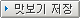
<style>
.page{position:relative;width:80px;height:18px}
.page>*{position:absolute;margin:0}
.t1{font:11px "Gulim";color:#333333}
</style>
<div class="page">
<p class="t1" style="left:15px;top:4px;width:57px;height:10px">맛보기 저장</p>
</div>
